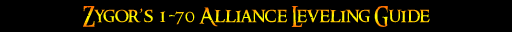
<style>
.page{position:relative;width:512px;height:32px;background:#000000}
.page>*{position:absolute;margin:0}
.t1{font:20px "RingbearerMedium"}
</style>
<div class="page">
<p class="t1" style="left:83px;top:6px;width:347px;height:21px">Zygor’s 1-70 Alliance Leveling Guide</p>
</div>
